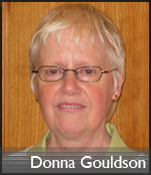
<style>
.page{position:relative;width:151px;height:175px}
.page>*{position:absolute;margin:0}
.t1{font:16.7px "GillSansMT";color:#fffefe}
</style>
<div class="page">
<p class="t1" style="left:31px;top:156px;width:115px;height:12px">Donna Gouldson</p>
</div>
